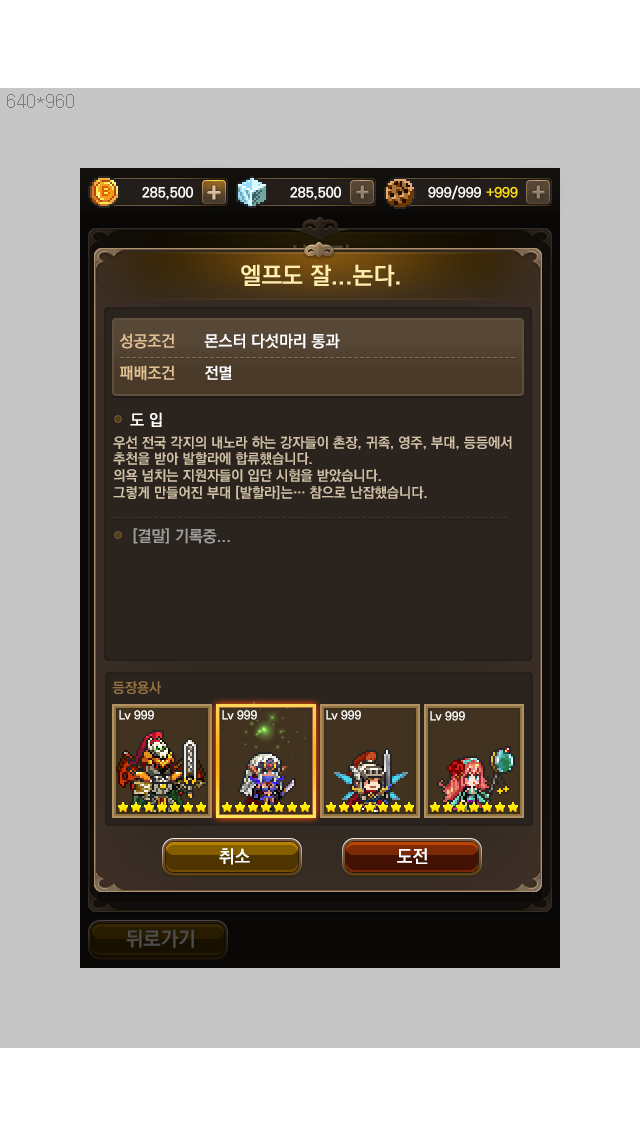
<style>
.page{position:relative;width:640px;height:1136px;background:#c6c6c6}
.page>*{position:absolute;margin:0}
.t1{font:24px "KoPubDotumBold";color:#ffedab}
.t2{font:16px "KoPubDotumBold";color:#e1c093}
.t3{font:16px "KoPubDotumBold";color:#ffffff}
.t4{font:14px "KoPubDotumBold";color:#d0c0a6}
.t5{font:16px "KoPubDotumBold";color:#9f9f9d}
.t6{font:14px "KoPubDotumBold";color:#937340}
.t7{font:12px "KoPubDotumBold";color:#ffffff}
.t8{font:18px "KoPubDotumBold";color:#ffffff}
.t9{font:20px "KoPubDotumBold";color:#4c4c4c}
</style>
<div class="page">
<p class="t1" style="left:241px;top:264px;width:159px;height:23px">엘프도 잘...논다.</p>
<p class="t2" style="left:119px;top:333px;width:56px;height:16px">성공조건</p>
<p class="t3" style="left:204px;top:333px;width:136px;height:16px">몬스터 다섯마리 통과</p>
<p class="t2" style="left:120px;top:365px;width:55px;height:16px">패배조건</p>
<p class="t3" style="left:205px;top:365px;width:27px;height:15px">전멸</p>
<p class="t3" style="left:130px;top:412px;width:32px;height:15px">도 입</p>
<p class="t4" style="left:113px;top:436px;width:399px;height:64px">우선 전국 각지의 내노라 하는 강자들이 촌장, 귀족, 영주, 부대, 등등에서 <br>추천을 받아 발할라에 합류했습니다.<br>의욕 넘치는 지원자들이 입단 시험을 받았습니다.<br>그렇게 만들어진 부대 [발할라]는… 참으로 난잡했습니다.</p>
<p class="t5" style="left:133px;top:528px;width:97px;height:16px">[결말] 기록중...</p>
<p class="t6" style="left:112px;top:681px;width:49px;height:13px">등장용사</p>
<p class="t7" style="left:119px;top:710px;width:35px;height:10px">Lv 999</p>
<p class="t7" style="left:222px;top:710px;width:35px;height:10px">Lv 999</p>
<p class="t7" style="left:326px;top:710px;width:35px;height:10px">Lv 999</p>
<p class="t7" style="left:430px;top:711px;width:35px;height:10px">Lv 999</p>
<p class="t8" style="left:219px;top:848px;width:31px;height:17px">취소</p>
<p class="t8" style="left:397px;top:848px;width:31px;height:16px">도전</p>
<p class="t9" style="left:126px;top:929px;width:68px;height:19px">뒤로가기</p>
</div>
